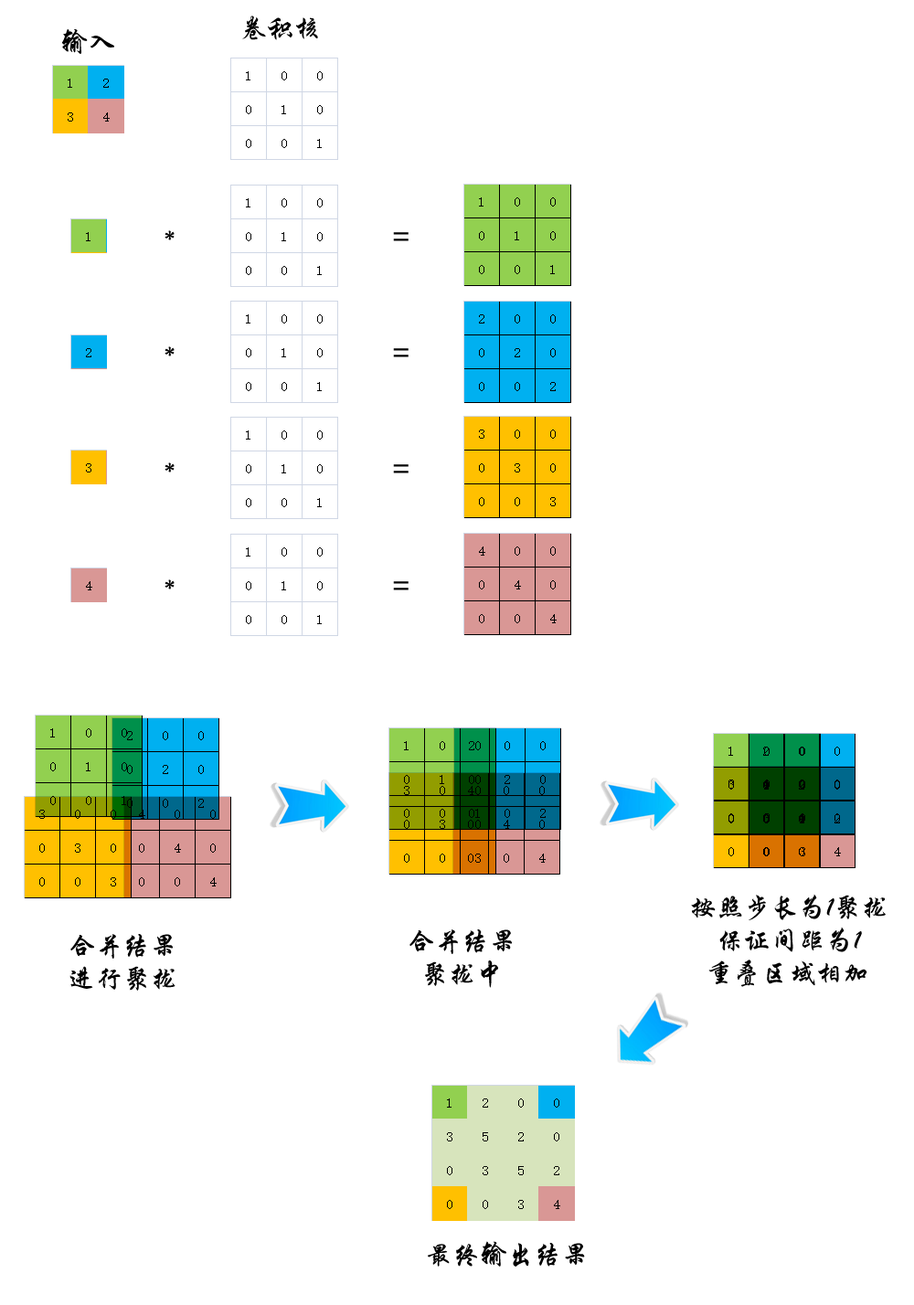
<style>
.page{position:relative;width:914px;height:1305px;background:#ffffff}
.page>*{position:absolute;margin:0}
.t1{font:27.4px "STXingkai";color:#000000}
.t2{font:27.4px/32.9px "STXingkai";color:#000000}
</style>
<div class="page">
<p class="t1" style="left:242px;top:16px;width:76px;height:24px">卷积核</p>
<p class="t1" style="left:61px;top:28px;width:53px;height:26px">输入</p>
<p class="t1" style="left:164px;top:230px;width:11px;height:10px">*</p>
<p class="t1" style="left:393px;top:232px;width:15px;height:9px">=</p>
<p class="t1" style="left:164px;top:346px;width:11px;height:10px">*</p>
<p class="t1" style="left:393px;top:348px;width:15px;height:9px">=</p>
<p class="t1" style="left:164px;top:462px;width:11px;height:10px">*</p>
<p class="t1" style="left:393px;top:464px;width:15px;height:9px">=</p>
<p class="t1" style="left:164px;top:579px;width:11px;height:10px">*</p>
<p class="t1" style="left:393px;top:581px;width:15px;height:9px">=</p>
<p class="t2" style="left:691px;top:894px;width:194px;height:93px;text-align:center">按照步长为1聚拢<br>保证间距为1<br>重叠区域相加</p>
<p class="t2" style="left:409px;top:929px;width:103px;height:59px;text-align:center">合并结果<br>聚拢中</p>
<p class="t2" style="left:69px;top:934px;width:106px;height:57px;text-align:center">合并结果<br>进行聚拢</p>
<p class="t1" style="left:428px;top:1241px;width:157px;height:26px">最终输出结果</p>
</div>
